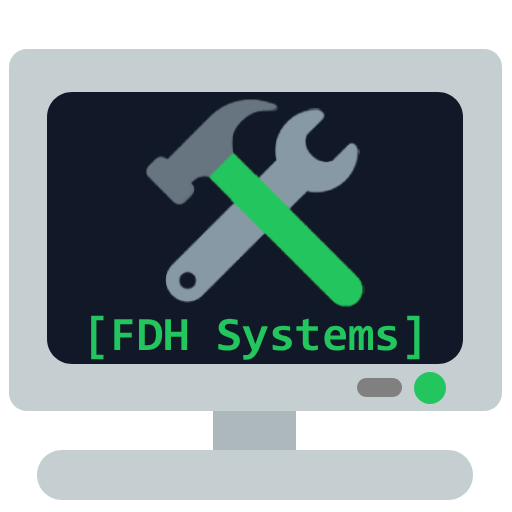
<style>
.page{position:relative;width:512px;height:512px;background:#111827}
.page>*{position:absolute;margin:0}
.t1{font:48px "Consolas-Bold";color:#22c55e}
</style>
<div class="page">
<p class="t1" style="left:91px;top:315px;width:329px;height:45px">[FDH Systems]</p>
</div>
